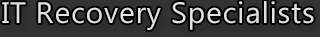
<style>
.page{position:relative;width:320px;height:37px;background:#333333}
.page>*{position:absolute;margin:0}
.t1{font:29.8px "MicrosoftTaiLe";letter-spacing:0.025em;color:#e0e0e0}
</style>
<div class="page">
<p class="t1" style="left:2px;top:1px;width:312px;height:29px">IT Recovery Specialists</p>
</div>
